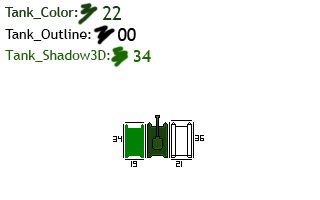
<style>
.page{position:relative;width:320px;height:200px;background:#ffffff}
.page>*{position:absolute;margin:0}
.t1{font:18.6px "TrebuchetMS";color:#1b400f}
.t2{font:14px "TrebuchetMS";color:#1b400f}
.t3{font:14px "TrebuchetMS";color:#000000}
.t4{font:17.6px "TrebuchetMS";color:#000000}
.t5{font:14px "TrebuchetMS";color:#196800}
.t6{font:17.4px "TrebuchetMS";color:#196800}
</style>
<div class="page">
<p class="t1" style="left:102px;top:6px;width:20px;height:14px">22</p>
<p class="t2" style="left:5px;top:7px;width:73px;height:12px">Tank_Color:</p>
<p class="t3" style="left:5px;top:29px;width:86px;height:12px">Tank_Outline:</p>
<p class="t4" style="left:118px;top:28px;width:18px;height:13px">00</p>
<p class="t5" style="left:5px;top:50px;width:105px;height:12px">Tank_Shadow3D:</p>
<p class="t6" style="left:133px;top:50px;width:18px;height:12px">34</p>
</div>
